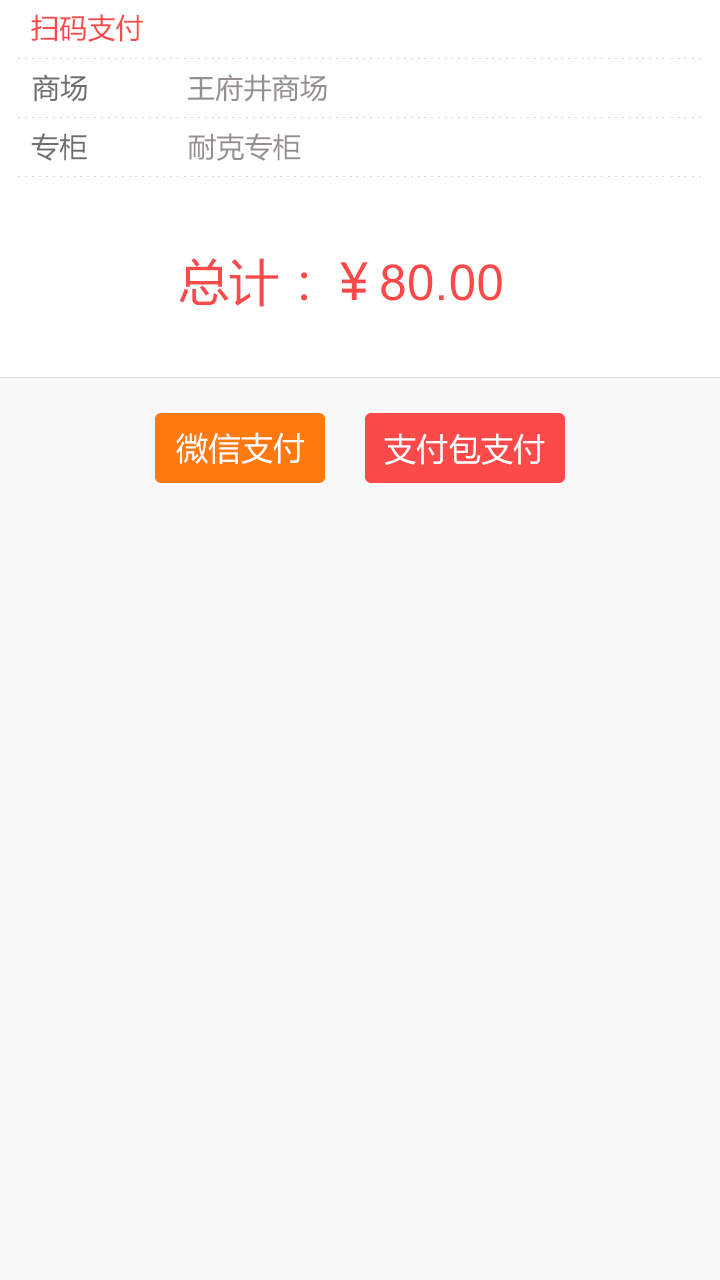
<style>
.page{position:relative;width:720px;height:1280px;background:#f7f7f7}
.page>*{position:absolute;margin:0}
.t1{font:28px "MicrosoftYaHei";letter-spacing:0.01em;color:#fc4a4a}
.t2{font:28px "MicrosoftYaHei";letter-spacing:0.01em;color:#6e6e6e}
.t3{font:28px "MicrosoftYaHei";letter-spacing:0.01em;color:#958f93}
.t4{font:50px "ArialMT";color:#fc4a4a}
.t5{font:50px "MicrosoftYaHei";color:#fc4a4a}
.t6{font:32px "MicrosoftYaHei";letter-spacing:0.01em;color:#ffffff}
</style>
<div class="page">
<p class="t1" style="left:31px;top:14px;width:112px;height:28px">扫码支付</p>
<p class="t2" style="left:32px;top:74px;width:55px;height:28px">商场</p>
<p class="t3" style="left:188px;top:74px;width:139px;height:28px">王府井商场</p>
<p class="t2" style="left:31px;top:133px;width:56px;height:28px">专柜</p>
<p class="t3" style="left:188px;top:133px;width:113px;height:28px">耐克专柜</p>
<p class="t4" style="left:179px;top:258px;width:323px;height:49px"><span class="t5">总计：￥</span>80.00</p>
<p class="t6" style="left:176px;top:432px;width:128px;height:32px">微信支付</p>
<p class="t6" style="left:384px;top:433px;width:161px;height:32px">支付包支付</p>
</div>
